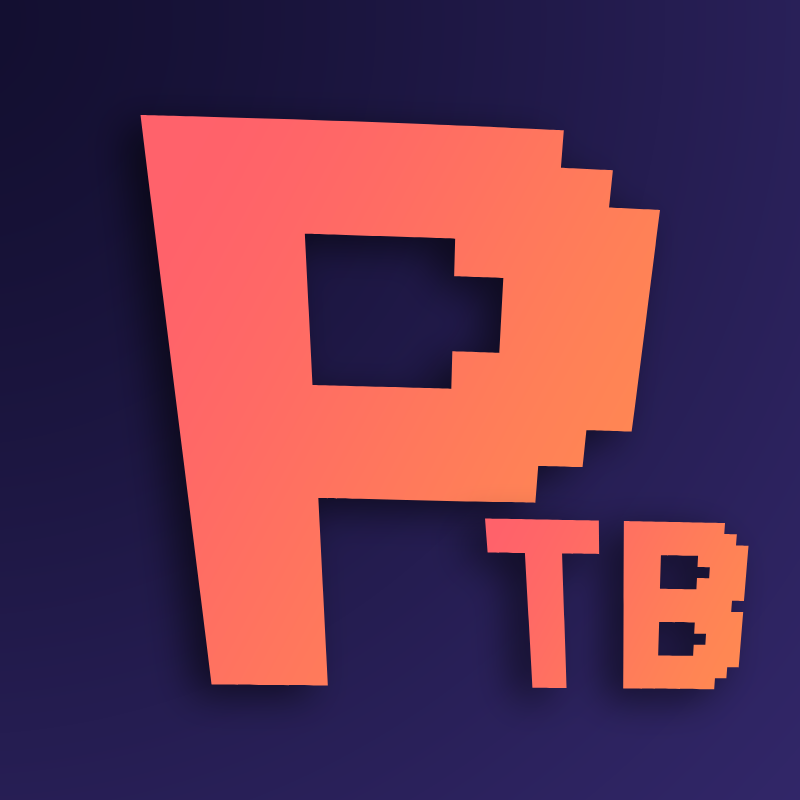
<style>
.page{position:relative;width:800px;height:800px}
.page>*{position:absolute;margin:0}
.t1{font:1000px "Jersey15-Regular";color:#ff7260}
.t2{font:300px "Jersey15-Regular";color:#ff7a5b}
</style>
<div class="page">
<p class="t1" style="left:140px;top:115px;width:521px;height:571px">P</p>
<p class="t2" style="left:485px;top:518px;width:264px;height:172px">TB</p>
</div>
